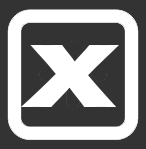
<style>
.page{position:relative;width:146px;height:149px;background:#333333}
.page>*{position:absolute;margin:0}
.t1{font:93.1px "ErasITC-Bold";color:#ffffff;scale:1.41 1}
</style>
<div class="page">
<p class="t1" style="left:21px;top:45px;width:98px;height:62px">X</p>
</div>
